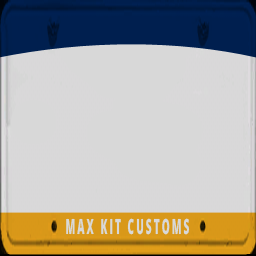
<style>
.page{position:relative;width:256px;height:256px;background:#d9d8d9}
.page>*{position:absolute;margin:0}
.t1{font:21px "OpenSans-Extrabold";letter-spacing:0.2em;color:#d8d8d8;scale:0.48 1}
</style>
<div class="page">
<p class="t1" style="left:66px;top:218px;width:124px;height:17px">MAX KIT CUSTOMS</p>
</div>
